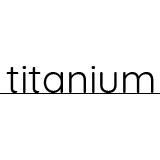
<style>
.page{position:relative;width:160px;height:160px;background:#ffffff}
.page>*{position:absolute;margin:0}
.t1{font:40px "Quicksand-Regular";color:#000000}
</style>
<div class="page">
<p class="t1" style="left:6px;top:66px;width:148px;height:27px">titanium</p>
</div>
